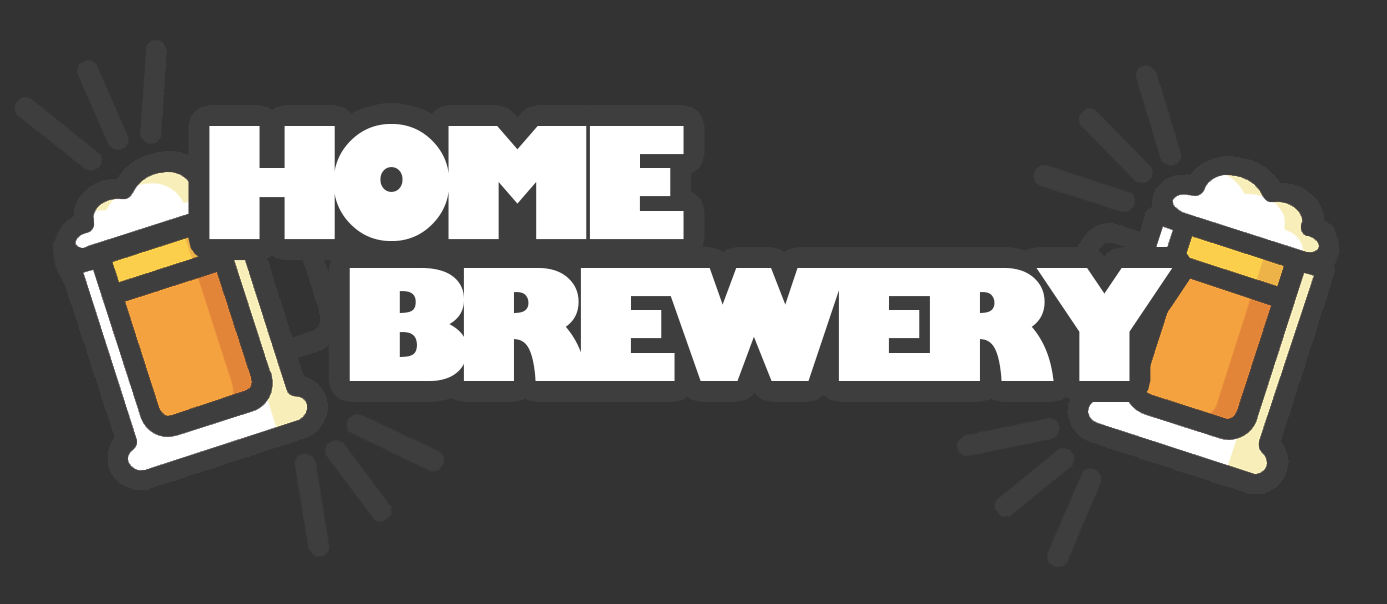
<style>
.page{position:relative;width:1387px;height:604px;background:#333333}
.page>*{position:absolute;margin:0}
.t1{font:151px "GillSans-UltraBold";letter-spacing:-0.12em;color:#ffffff}
</style>
<div class="page">
<p class="t1" style="left:209px;top:124px;width:475px;height:117px">HOME</p>
<p class="t1" style="left:349px;top:268px;width:824px;height:113px">BREWERY</p>
</div>
